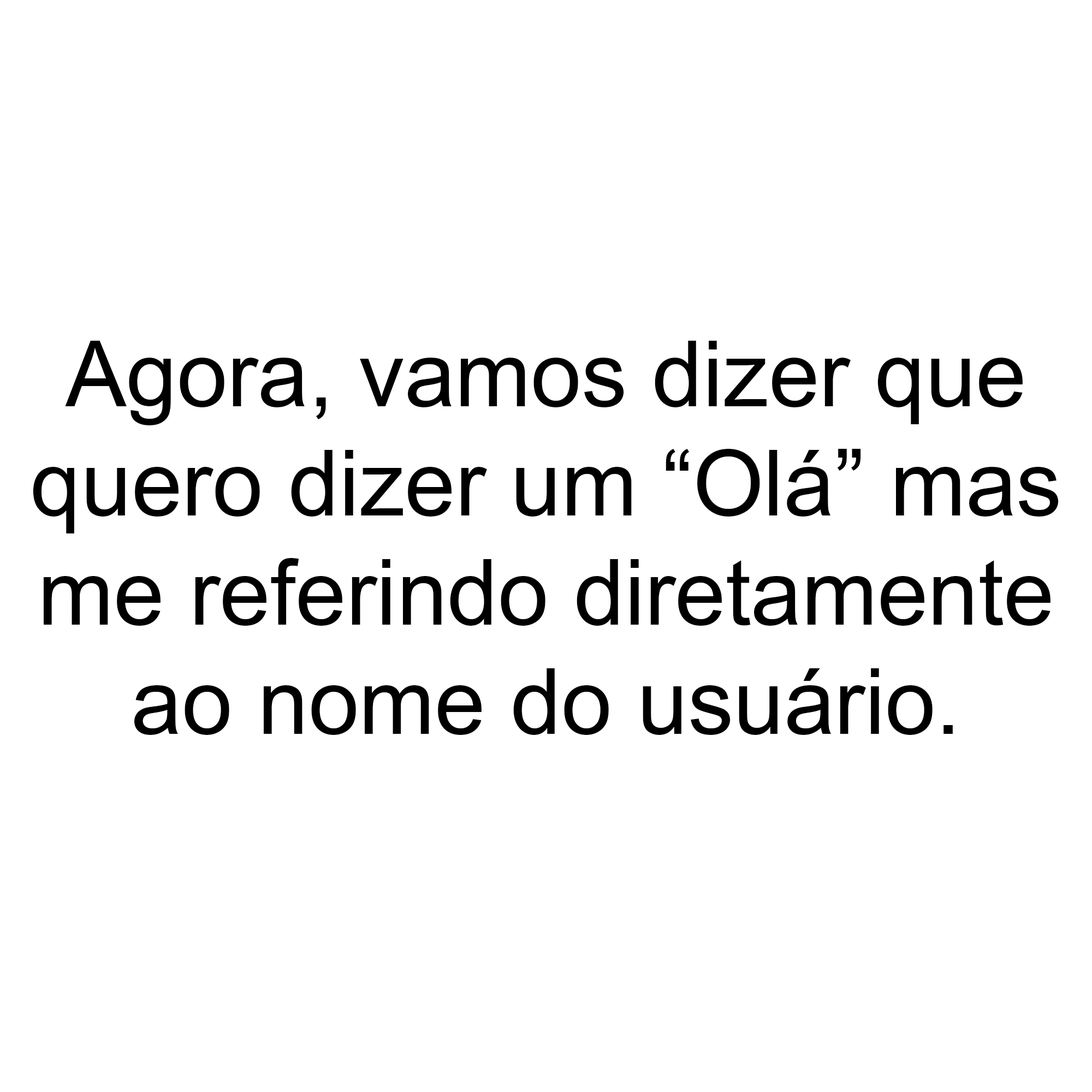
<style>
.page{position:relative;width:1092px;height:1092px;background:#ffffff}
.page>*{position:absolute;margin:0}
.t1{font:91px "ArialMT";color:#000000}
</style>
<div class="page">
<p class="t1" style="left:33px;top:341px;width:1026px;height:394px;text-align:center">Agora, vamos dizer que<br>quero dizer um “Olá” mas<br>me referindo diretamente<br>ao nome do usuário.</p>
</div>
